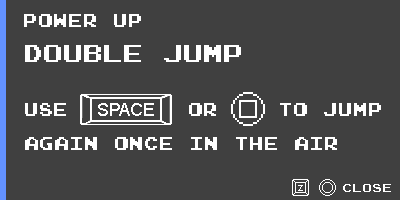
<style>
.page{position:relative;width:400px;height:200px;background:#404040}
.page>*{position:absolute;margin:0}
.t1{font:18px "JoystixMonospace-Regular";color:#ffffff}
.t2{font:24px "JoystixMonospace-Regular";color:#ffffff}
.t3{font:18px "ArialMT";color:#ffffff}
.t4{font:11px "ArialMT";color:#ffffff}
.t5{font:12px "JoystixMonospace-Regular";color:#ffffff}
</style>
<div class="page">
<p class="t1" style="left:24px;top:14px;width:117px;height:13px">Power Up</p>
<p class="t2" style="left:25px;top:45px;width:216px;height:17px">double jump</p>
<p class="t1" style="left:25px;top:103px;width:356px;height:47px">USE        or    to JUMP<br>again once in the air</p>
<p class="t3" style="left:98px;top:103px;width:56px;height:13px">SPACE</p>
<p class="t4" style="left:298px;top:185px;width:5px;height:6px">z</p>
<p class="t5" style="left:343px;top:184px;width:48px;height:8px">close</p>
</div>
